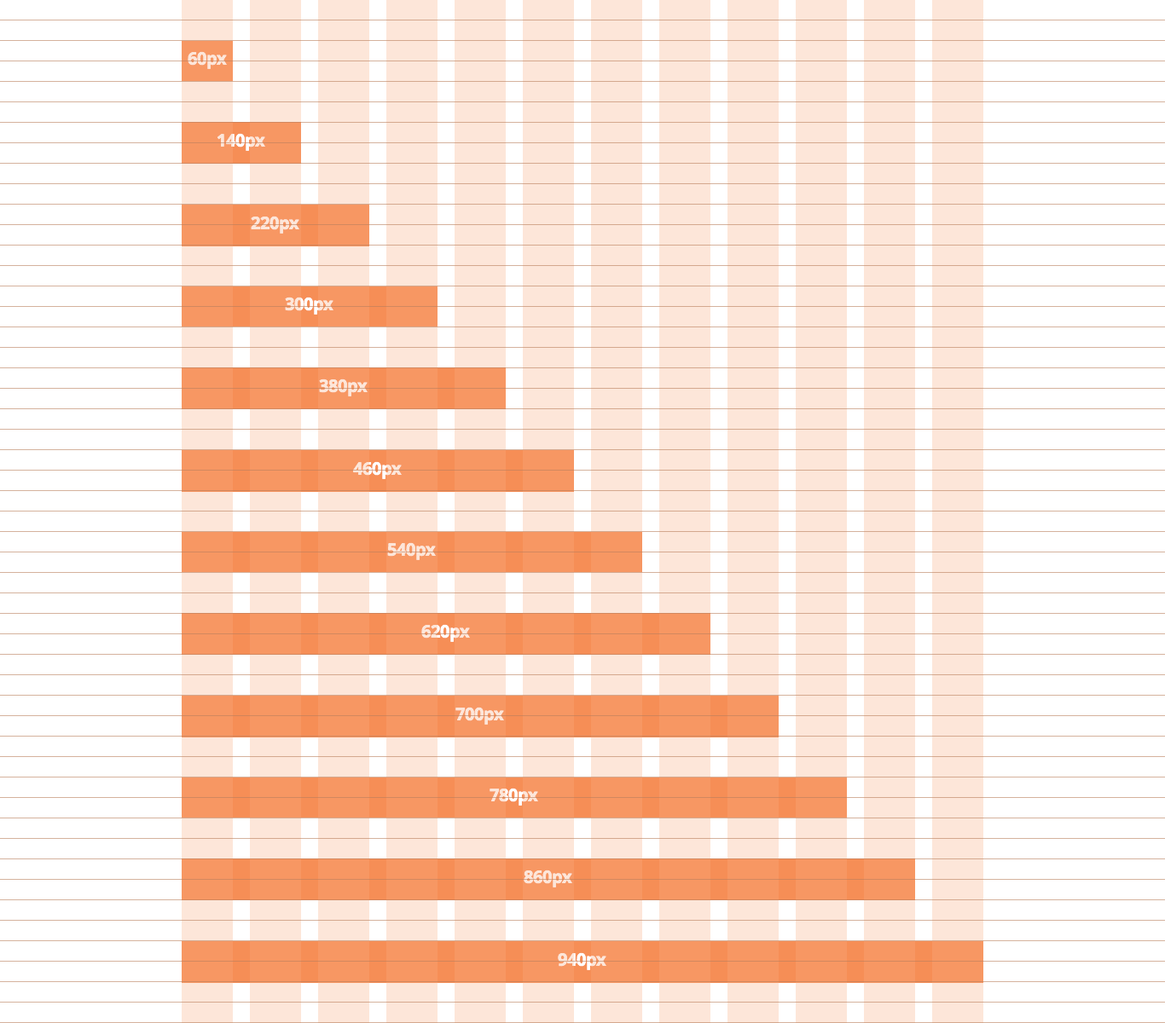
<style>
.page{position:relative;width:1165px;height:1023px;background:#ffffff}
.page>*{position:absolute;margin:0}
.t1{font:17.1px "OpenSans-Bold";letter-spacing:-0.02em;color:#fde6d9}
.t2{font:17.1px "OpenSans-Bold";letter-spacing:-0.02em}
</style>
<div class="page">
<p class="t1" style="left:188px;top:51px;width:39px;height:18px">60px</p>
<p class="t2" style="left:217px;top:133px;width:48px;height:18px">140px</p>
<p class="t1" style="left:251px;top:216px;width:48px;height:18px">220px</p>
<p class="t2" style="left:285px;top:297px;width:48px;height:18px">300px</p>
<p class="t1" style="left:319px;top:379px;width:49px;height:18px">380px</p>
<p class="t2" style="left:353px;top:461px;width:49px;height:18px">460px</p>
<p class="t1" style="left:387px;top:542px;width:49px;height:18px">540px</p>
<p class="t2" style="left:421px;top:624px;width:49px;height:18px">620px</p>
<p class="t1" style="left:455px;top:707px;width:49px;height:18px">700px</p>
<p class="t2" style="left:490px;top:788px;width:48px;height:18px">780px</p>
<p class="t1" style="left:524px;top:870px;width:48px;height:18px">860px</p>
<p class="t2" style="left:558px;top:953px;width:48px;height:18px">940px</p>
</div>
